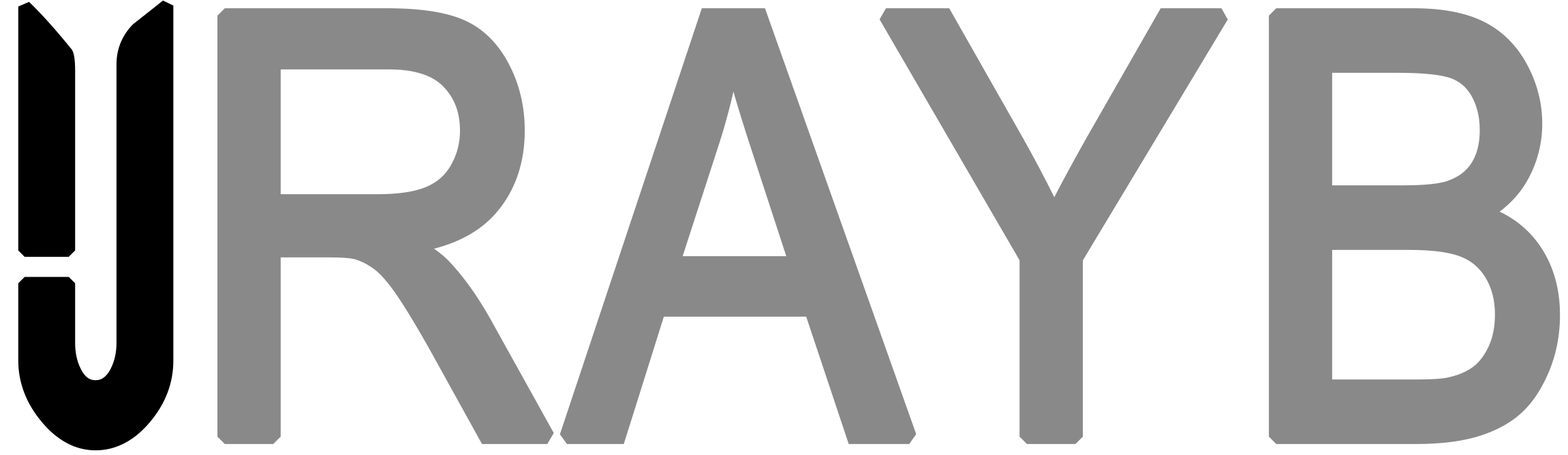
<style>
.page{position:relative;width:1568px;height:455px;background:#ffffff}
.page>*{position:absolute;margin:0}
.t1{font:506.1px "KufiStandardGK";color:#000000;font-weight:bold;scale:0.87 1}
.t2{font:587.7px "ArialMT";color:#898989;font-weight:bold;scale:0.87 1}
</style>
<div class="page">
<p class="t1" style="left:18px;top:0px;width:156px;height:451px">لا</p>
<p class="t2" style="left:217px;top:8px;width:1344px;height:436px">RAYB</p>
</div>
